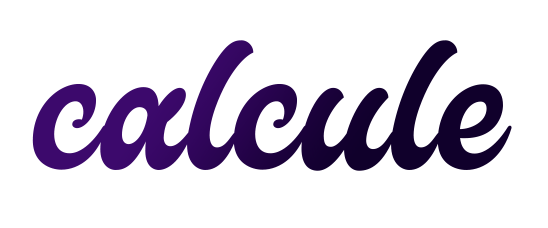
<style>
.page{position:relative;width:548px;height:228px;background:#ffffff}
.page>*{position:absolute;margin:0}
.t1{font:150px "AloretaMarthin";letter-spacing:0.01em}
</style>
<div class="page">
<p class="t1" style="left:32px;top:40px;width:480px;height:131px">calcule</p>
</div>
